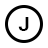
<style>
.page{position:relative;width:48px;height:48px;background:#ffffff}
.page>*{position:absolute;margin:0}
.t1{font:20px "Roboto-Bold";color:#000000}
</style>
<div class="page">
<p class="t1" style="left:18px;top:17px;width:11px;height:14px">J</p>
</div>
